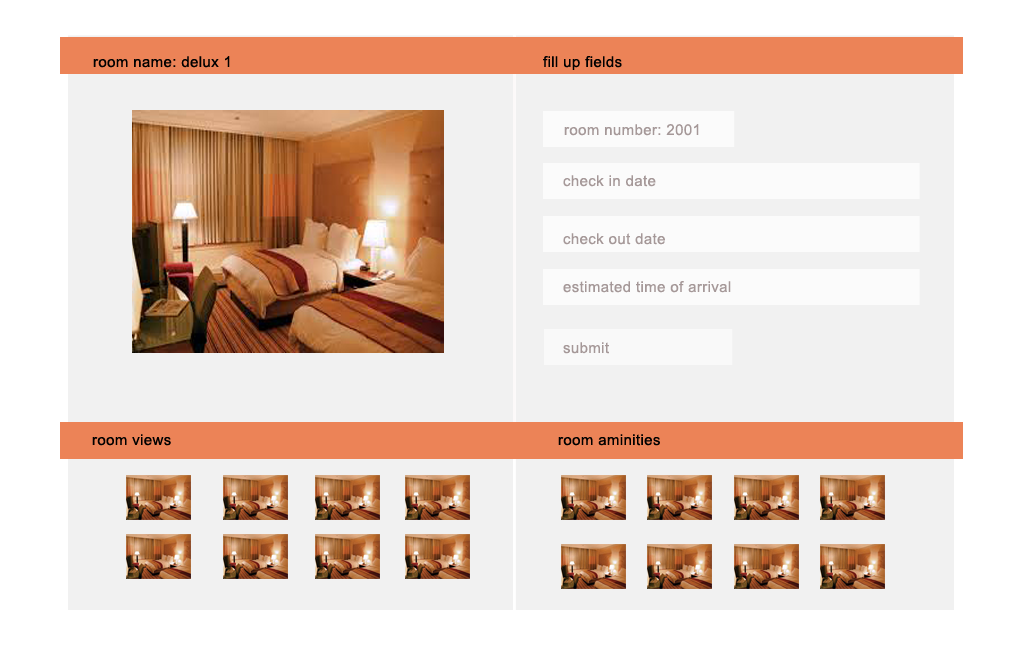
<style>
.page{position:relative;width:1024px;height:670px;background:#f1f1f1}
.page>*{position:absolute;margin:0}
.t1{font:15px "ArialMT";letter-spacing:0.025em;color:#000000}
.t2{font:15px "ArialMT";letter-spacing:0.025em;color:#a59898}
</style>
<div class="page">
<p class="t1" style="left:93px;top:56px;width:137px;height:12px">room name: delux 1</p>
<p class="t1" style="left:543px;top:56px;width:79px;height:14px">fill up fields</p>
<p class="t2" style="left:564px;top:124px;width:135px;height:12px">room number: 2001</p>
<p class="t2" style="left:563px;top:175px;width:93px;height:12px">check in date</p>
<p class="t2" style="left:563px;top:233px;width:102px;height:12px">check out date</p>
<p class="t2" style="left:563px;top:281px;width:168px;height:12px">estimated time of arrival</p>
<p class="t2" style="left:563px;top:342px;width:46px;height:12px">submit</p>
<p class="t1" style="left:92px;top:434px;width:79px;height:12px">room views</p>
<p class="t1" style="left:558px;top:434px;width:102px;height:12px">room aminities</p>
</div>
